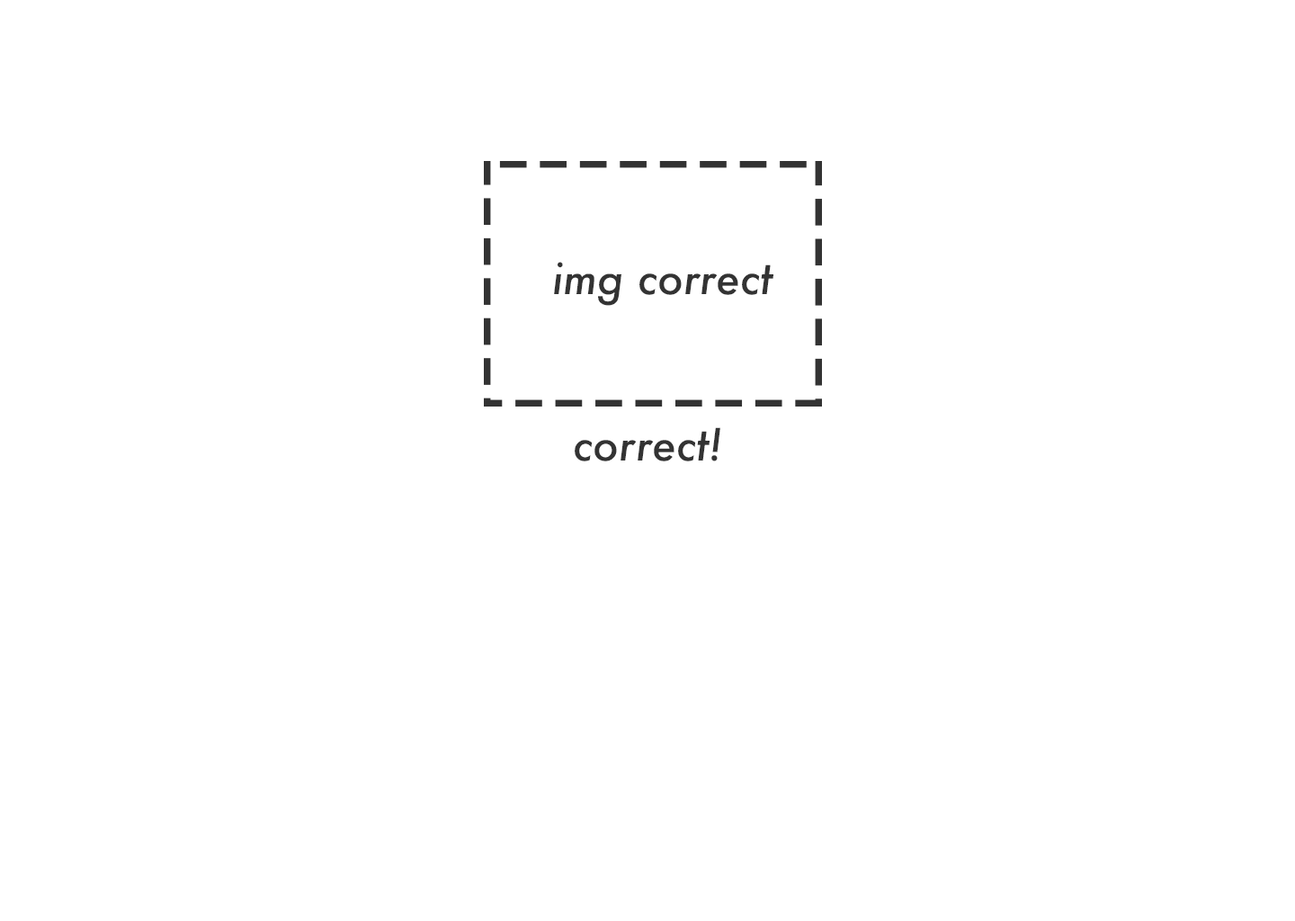
<style>
.page{position:relative;width:1295px;height:921px;background:#ffffff}
.page>*{position:absolute;margin:0}
.t1{font:43.2px "Futura-MediumItalic";color:#333333}
</style>
<div class="page">
<p class="t1" style="left:554px;top:262px;width:219px;height:44px">img correct</p>
<p class="t1" style="left:575px;top:427px;width:145px;height:34px">correct!</p>
</div>
